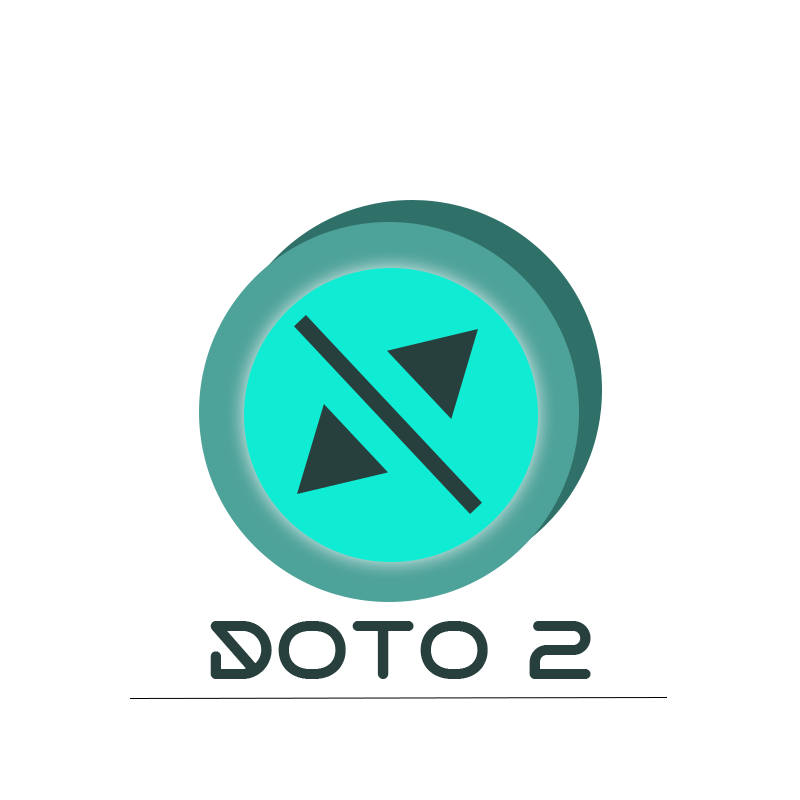
<style>
.page{position:relative;width:800px;height:800px;background:#ffffff}
.page>*{position:absolute;margin:0}
.t1{font:80.7px "VarinoNormal-Regular";color:#28403d}
</style>
<div class="page">
<p class="t1" style="left:210px;top:621px;width:381px;height:58px">doto 2</p>
</div>
